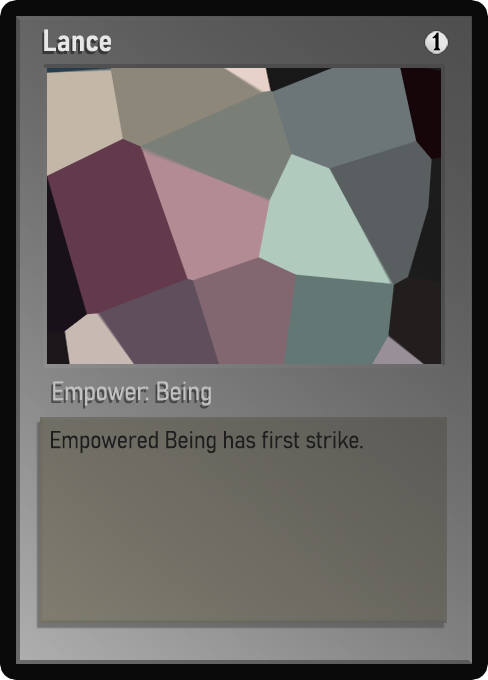
<style>
.page{position:relative;width:488px;height:680px}
.page>*{position:absolute;margin:0}
.t1{font:30px "Bahnschrift-SemiBoldSemiCondensed";color:#f2f2f2;font-weight:bold}
.t2{font:25px "WTRRoycroft";color:#000000;font-weight:bold;scale:1.09 1}
.t3{font:26px "Bahnschrift-LightSemiCondensed";color:#c8c8c8;font-weight:bold}
.t4{font:24px "Bahnschrift-LightSemiCondensed";color:#1e1e1e;font-weight:bold}
</style>
<div class="page">
<p class="t1" style="left:44px;top:29px;width:67px;height:23px;opacity:0.9">Lance</p>
<p class="t2" style="left:432px;top:32px;width:9px;height:19px">1</p>
<p class="t3" style="left:53px;top:381px;width:158px;height:25px;opacity:0.9">Empower: Being</p>
<p class="t4" style="left:51px;top:431px;width:312px;height:22px">Empowered Being has first strike.</p>
</div>
